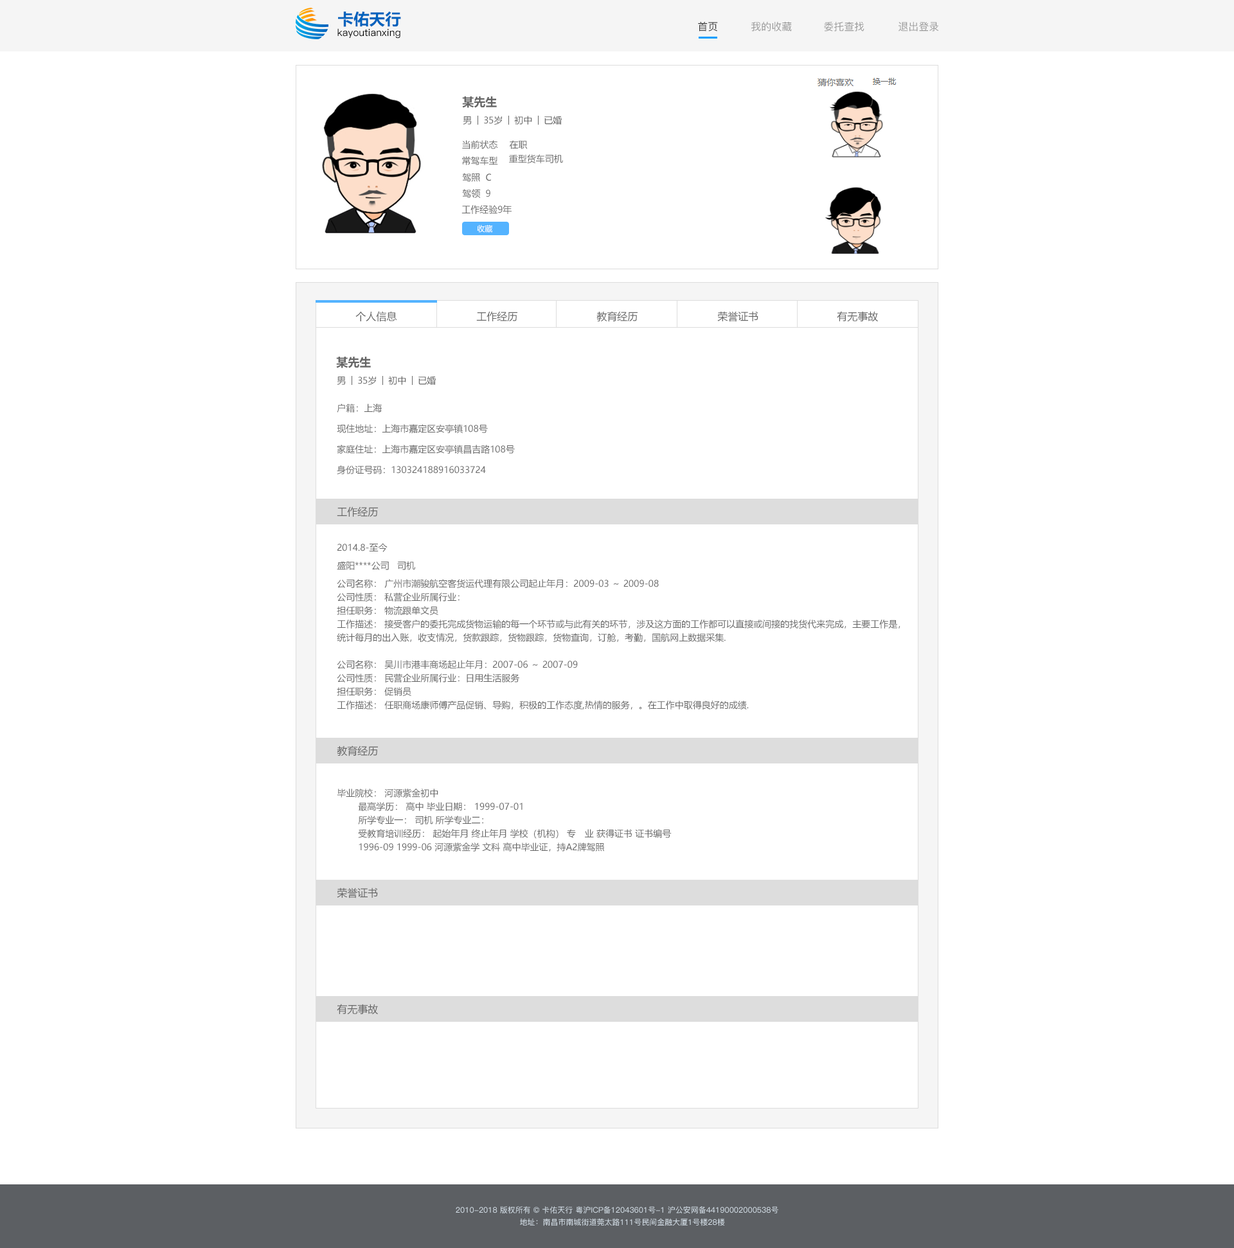
<style>
.page{position:relative;width:1234px;height:1248px;background:#ffffff}
.page>*{position:absolute;margin:0}
.t1{font:15.8px "MicrosoftYaHei-Bold";color:#0263bd}
.t2{font:10px "PingFang-SC-Medium";color:#000000}
.t3{font:10.3px "PingFang-SC-Medium";color:#333333}
.t4{font:10.3px "PingFang-SC-Medium";color:#999999}
.t5{font:11.6px "MicrosoftYaHei-Bold";color:#666666}
.t6{font:9px "MicrosoftYaHei";color:#666666}
.t7{font:7.7px "MicrosoftYaHei";color:#ffffff}
.t8{font:10.3px "MicrosoftYaHei";color:#666666}
.t9{font:9px/13.5px "MicrosoftYaHei";color:#666666}
.t10{font:7.7px/12.2px "PingFang-SC-Medium";color:#d6e0e9}
</style>
<div class="page">
<p class="t1" style="left:338px;top:11px;width:63px;height:16px">卡佑天行</p>
<p class="t2" style="left:338px;top:28px;width:63px;height:11px">kayoutianxing</p>
<p class="t3" style="left:698px;top:22px;width:20px;height:10px">首页</p>
<p class="t4" style="left:752px;top:22px;width:40px;height:10px">我的收藏</p>
<p class="t4" style="left:824px;top:22px;width:41px;height:10px">委托查找</p>
<p class="t4" style="left:899px;top:22px;width:40px;height:10px">退出登录</p>
<p class="t5" style="left:462px;top:96px;width:35px;height:12px">某先生</p>
<p class="t6" style="left:463px;top:116px;width:9px;height:9px">男</p>
<p class="t6" style="left:484px;top:116px;width:18px;height:9px">35岁</p>
<p class="t6" style="left:514px;top:116px;width:18px;height:9px">初中</p>
<p class="t6" style="left:544px;top:116px;width:18px;height:9px">已婚</p>
<p class="t6" style="left:462px;top:140px;width:36px;height:9px">当前状态</p>
<p class="t6" style="left:509px;top:140px;width:19px;height:9px">在职</p>
<p class="t6" style="left:462px;top:156px;width:36px;height:9px">常驾车型</p>
<p class="t6" style="left:509px;top:154px;width:54px;height:9px">重型货车司机</p>
<p class="t6" style="left:462px;top:173px;width:29px;height:9px">驾照  C</p>
<p class="t6" style="left:462px;top:189px;width:29px;height:9px">驾领  9</p>
<p class="t6" style="left:462px;top:205px;width:50px;height:9px">工作经验9年</p>
<p class="t7" style="left:477px;top:225px;width:16px;height:8px">收藏</p>
<p class="t8" style="left:356px;top:311px;width:41px;height:11px">个人信息</p>
<p class="t8" style="left:476px;top:311px;width:42px;height:10px">工作经历</p>
<p class="t8" style="left:597px;top:311px;width:41px;height:11px">教育经历</p>
<p class="t8" style="left:717px;top:311px;width:42px;height:11px">荣誉证书</p>
<p class="t8" style="left:837px;top:311px;width:41px;height:11px">有无事故</p>
<p class="t5" style="left:336px;top:357px;width:35px;height:11px">某先生</p>
<p class="t6" style="left:337px;top:377px;width:9px;height:8px">男</p>
<p class="t6" style="left:358px;top:376px;width:18px;height:9px">35岁</p>
<p class="t6" style="left:388px;top:376px;width:18px;height:9px">初中</p>
<p class="t6" style="left:419px;top:376px;width:17px;height:9px">已婚</p>
<p class="t6" style="left:337px;top:404px;width:45px;height:9px">户籍：上海</p>
<p class="t6" style="left:337px;top:424px;width:151px;height:9px">现住地址：上海市嘉定区安亭镇108号</p>
<p class="t6" style="left:337px;top:445px;width:178px;height:9px">家庭住址：上海市嘉定区安亭镇昌吉路108号</p>
<p class="t6" style="left:337px;top:465px;width:149px;height:9px">身份证号码：130324188916033724</p>
<p class="t8" style="left:337px;top:507px;width:41px;height:10px">工作经历</p>
<p class="t6" style="left:338px;top:543px;width:50px;height:9px">2014.8-至今</p>
<p class="t6" style="left:337px;top:561px;width:78px;height:9px">盛阳****公司   司机</p>
<p class="t9" style="left:337px;top:579px;width:564px;height:131px">公司名称： 广州市潮骏航空客货运代理有限公司起止年月：2009-03 ～ 2009-08 <br>公司性质： 私营企业所属行业： <br>担任职务： 物流跟单文员  <br>工作描述： 接受客户的委托完成货物运输的每一个环节或与此有关的环节，涉及这方面的工作都可以直接或间接的找货代来完成，主要工作是，<br>统计每月的出入账，收支情况，货款跟踪，货物跟踪，货物查询，订舱，考勤，国航网上数据采集.  <br> <br>公司名称： 吴川市港丰商场起止年月：2007-06 ～ 2007-09 <br>公司性质： 民营企业所属行业：日用生活服务 <br>担任职务： 促销员  <br>工作描述： 任职商场康师傅产品促销、导购，积极的工作态度,热情的服务，。在工作中取得良好的成绩.</p>
<p class="t8" style="left:337px;top:746px;width:41px;height:11px">教育经历</p>
<p class="t9" style="left:337px;top:789px;width:335px;height:63px">毕业院校： 河源紫金初中<br>        最高学历： 高中 毕业日期： 1999-07-01<br>        所学专业一： 司机 所学专业二：<br>        受教育培训经历： 起始年月 终止年月 学校（机构） 专　业 获得证书 证书编号<br>        1996-09 1999-06 河源紫金学 文科 高中毕业证，持A2牌驾照</p>
<p class="t8" style="left:337px;top:888px;width:41px;height:11px">荣誉证书</p>
<p class="t8" style="left:337px;top:1004px;width:41px;height:11px">有无事故</p>
<p class="t10" style="left:456px;top:1207px;width:323px;height:20px;text-align:center">2010-2018 版权所有 © 卡佑天行 粤沪ICP备12043601号-1 沪公安网备44190002000538号    <br>地址：南昌市南城街道莞太路111号民间金融大厦1号楼28楼</p>
</div>
